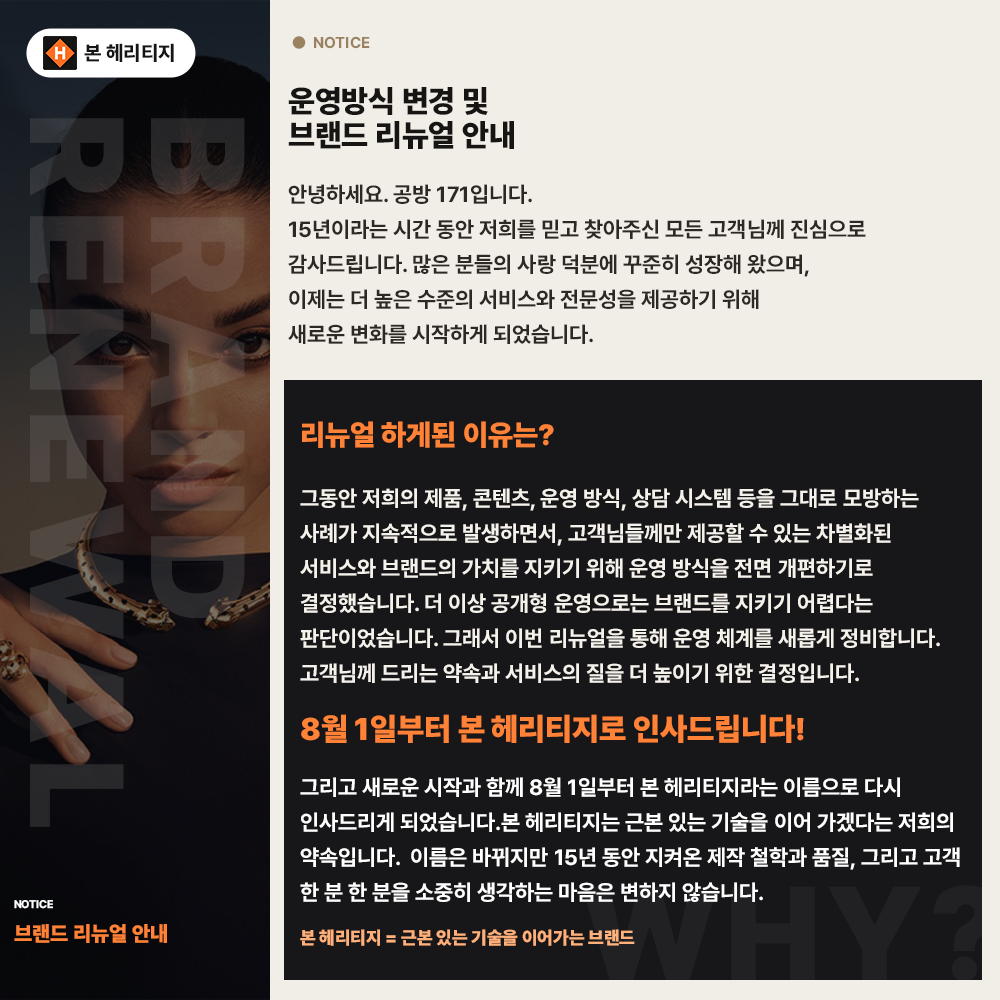
<style>
.page{position:relative;width:1000px;height:1000px;background:#171719}
.page>*{position:absolute;margin:0}
.t1{font:15.6px "Pretendard-Bold";color:#9a8160}
.t2{font:20.2px "Pretendard-ExtraBold";color:#161513}
.t3{font:31px/34.1px "Pretendard-Black";color:#161513}
.t4{font:132px/120.2px "Pretendard-Black";letter-spacing:0.1em}
.t5{font:22px/35px "Pretendard-Bold";color:#2c2925}
.t6{font:29px "Pretendard-Black";color:#ff8236}
.t7{font:22px/35px "Pretendard-Bold";color:#f5f1eb}
.t8{font:31.2px "Pretendard-Black";color:#ff8236}
.t9{font:22px/35px "Pretendard-Bold";color:#ffffff}
.t10{font:11px "Pretendard-Bold";color:#ffffff}
.t11{font:21px "Pretendard-Black";color:#ff8236}
.t12{font:18px "Pretendard-Black";color:#ffb07a}
</style>
<div class="page">
<p class="t1" style="left:292px;top:36px;width:78px;height:13px">●  NOTICE</p>
<p class="t2" style="left:84px;top:43px;width:90px;height:19px">본 헤리티지</p>
<p class="t3" style="left:288px;top:87px;width:226px;height:62px">운영방식 변경 및<br>브랜드 리뉴얼 안내</p>
<p class="t4" style="left:30px;top:118px;width:215px;height:709px;rotate:90deg">BRAND<br>RENEWAL</p>
<p class="t5" style="left:288px;top:184px;width:578px;height:160px">안녕하세요. 공방 171입니다.<br>15년이라는 시간 동안 저희를 믿고 찾아주신 모든 고객님께 진심으로 감사드립니다. 많은 분들의 사랑 덕분에 꾸준히 성장해 왔으며,<br>이제는 더 높은 수준의 서비스와 전문성을 제공하기 위해<br>새로운 변화를 시작하게 되었습니다.</p>
<p class="t6" style="left:302px;top:421px;width:252px;height:27px">리뉴얼 하게된 이유는?</p>
<p class="t7" style="left:300px;top:488px;width:640px;height:195px">그동안 저희의 제품, 콘텐츠, 운영 방식, 상담 시스템 등을 그대로 모방하는 사례가 지속적으로 발생하면서, 고객님들께만 제공할 수 있는 차별화된 서비스와 브랜드의 가치를 지키기 위해 운영 방식을 전면 개편하기로 결정했습니다. 더 이상 공개형 운영으로는 브랜드를 지키기 어렵다는 판단이었습니다. 그래서 이번 리뉴얼을 통해 운영 체계를 새롭게 정비합니다.<br>고객님께 드리는 약속과 서비스의 질을 더 높이기 위한 결정입니다.</p>
<p class="t8" style="left:301px;top:714px;width:503px;height:29px">8월 1일부터 본 헤리티지로 인사드립니다!</p>
<p class="t9" style="left:300px;top:777px;width:660px;height:125px">그리고 새로운 시작과 함께 8월 1일부터 본 헤리티지라는 이름으로 다시 인사드리게 되었습니다.본 헤리티지는 근본 있는 기술을 이어 가겠다는 저희의 약속입니다.  이름은 바뀌지만 15년 동안 지켜온 제작 철학과 품질, 그리고 고객 한 분 한 분을 소중히 생각하는 마음은 변하지 않습니다.</p>
<p class="t10" style="left:14px;top:900px;width:39px;height:9px">NOTICE</p>
<p class="t11" style="left:14px;top:924px;width:153px;height:19px">브랜드 리뉴얼 안내</p>
<p class="t12" style="left:300px;top:929px;width:335px;height:17px">본 헤리티지 = 근본 있는 기술을 이어가는 브랜드</p>
</div>
